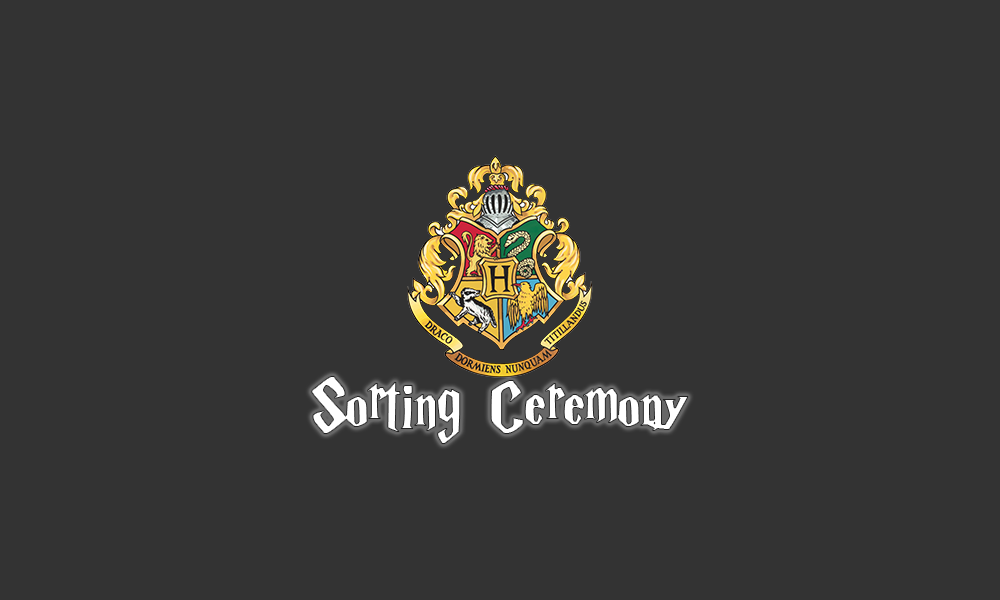
<style>
.page{position:relative;width:1000px;height:600px;background:#333333}
.page>*{position:absolute;margin:0}
.t1{font:75px "HarryP";letter-spacing:-0.025em;color:#ffffff;font-weight:bold}
</style>
<div class="page">
<p class="t1" style="left:311px;top:376px;width:378px;height:68px">Sorting Ceremony</p>
</div>
